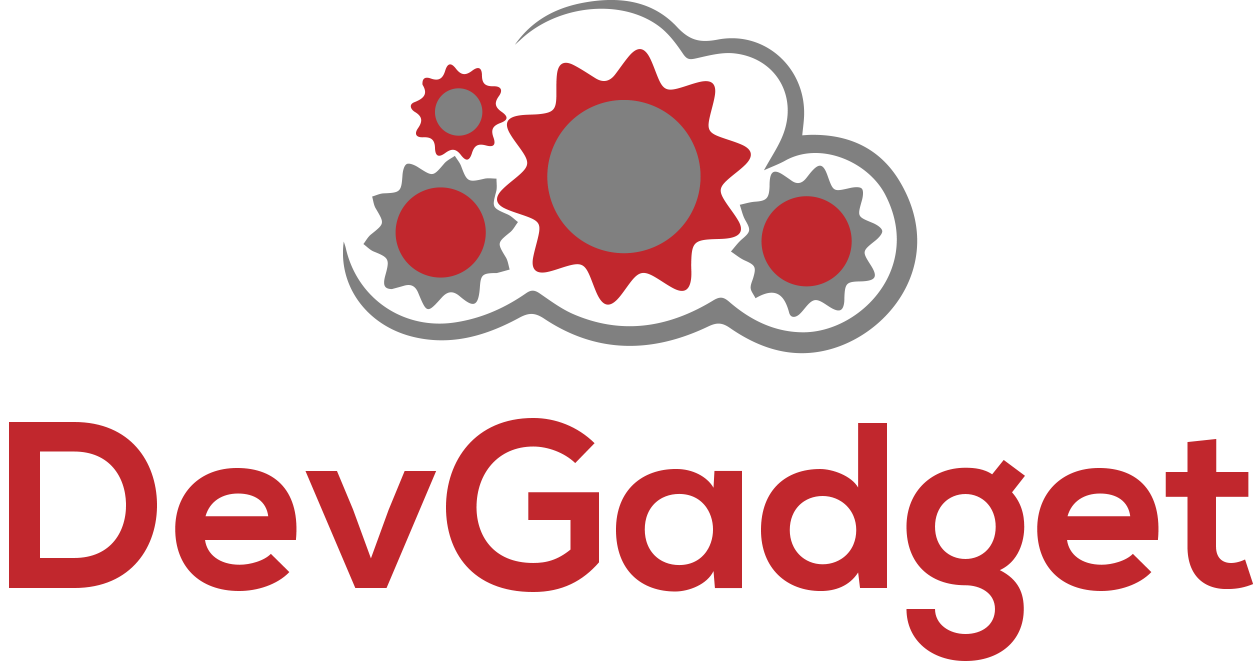
<style>
.page{position:relative;width:1260px;height:661px;background:#ffffff}
.page>*{position:absolute;margin:0}
.t1{font:236.1px "NexaBold";color:#c1272d}
</style>
<div class="page">
<p class="t1" style="left:9px;top:418px;width:1245px;height:243px">DevGadget</p>
</div>
